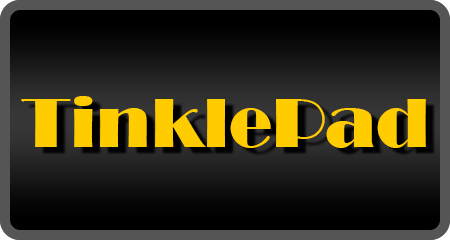
<style>
.page{position:relative;width:450px;height:240px}
.page>*{position:absolute;margin:0}
.t1{font:72px "Broadway";color:#ffcc00}
</style>
<div class="page">
<p class="t1" style="left:21px;top:96px;width:405px;height:52px">TinklePad</p>
</div>
